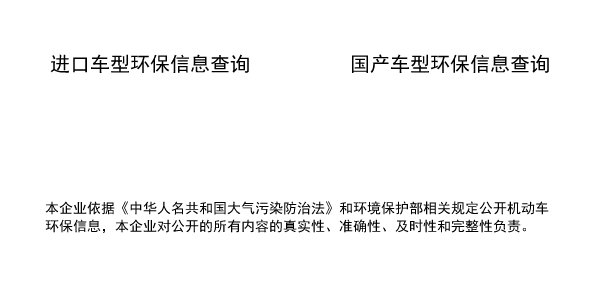
<style>
.page{position:relative;width:600px;height:300px;background:#ffffff}
.page>*{position:absolute;margin:0}
.t1{font:20px "SimHei";color:#000000}
.t2{font:14px/18px "SimHei";color:#000000}
</style>
<div class="page">
<p class="t1" style="left:50px;top:54px;width:199px;height:19px">进口车型环保信息查询</p>
<p class="t1" style="left:352px;top:54px;width:197px;height:19px">国产车型环保信息查询</p>
<p class="t2" style="left:45px;top:201px;width:504px;height:32px">本企业依据《中华人名共和国大气污染防治法》和环境保护部相关规定公开机动车<br>环保信息，本企业对公开的所有内容的真实性、准确性、及时性和完整性负责。</p>
</div>
